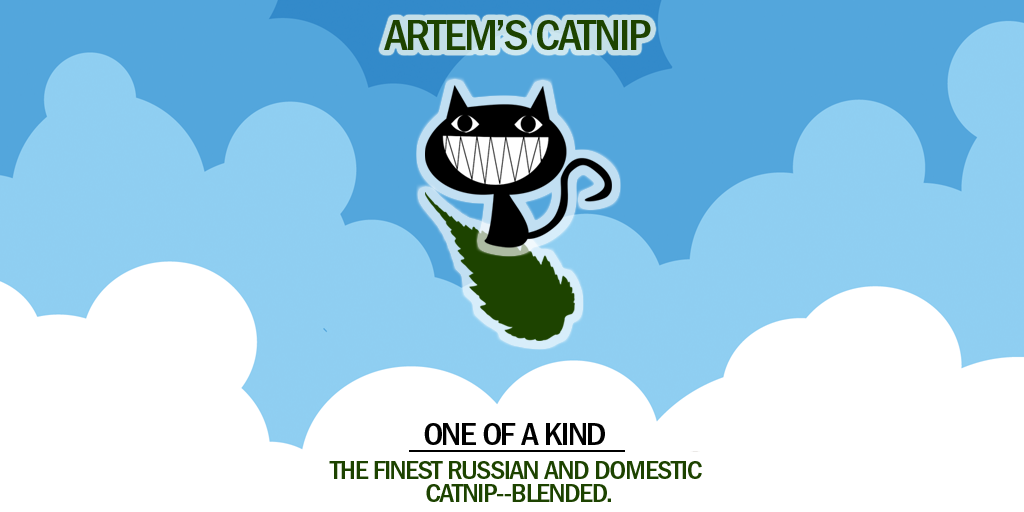
<style>
.page{position:relative;width:1024px;height:512px;background:#ffffff}
.page>*{position:absolute;margin:0}
.t1{font:43.2px "FranklinGothic-MedCnd";letter-spacing:-0.05em;color:#1d4300;scale:1.11 1}
.t2{font:32.4px "FranklinGothic-MedCnd";letter-spacing:-0.05em;color:#000000;scale:1.11 1}
.t3{font:27px/5.8px "FranklinGothic-MedCnd";letter-spacing:-0.05em;color:#1d4300;scale:1.11 1}
</style>
<div class="page">
<p class="t1" style="left:384px;top:20px;width:267px;height:30px">ARTEM’S CATNIP</p>
<p class="t2" style="left:424px;top:423px;width:181px;height:22px">ONE OF A KIND</p>
<p class="t3" style="left:329px;top:461px;width:373px;height:41px;text-align:center">THE FINEST RUSSIAN AND DOMESTIC<br><br><br><br> CATNIP--BLENDED.</p>
</div>
